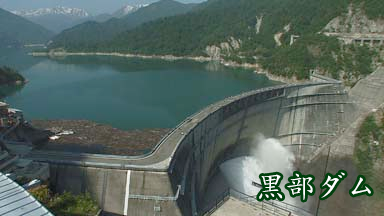
<style>
.page{position:relative;width:384px;height:216px}
.page>*{position:absolute;margin:0}
.t1{font:30px "DFKaiSho-Md-MP-RKSJ-H";color:#ffffff}
</style>
<div class="page">
<p class="t1" style="left:259px;top:172px;width:112px;height:28px">黒部ダム</p>
</div>
